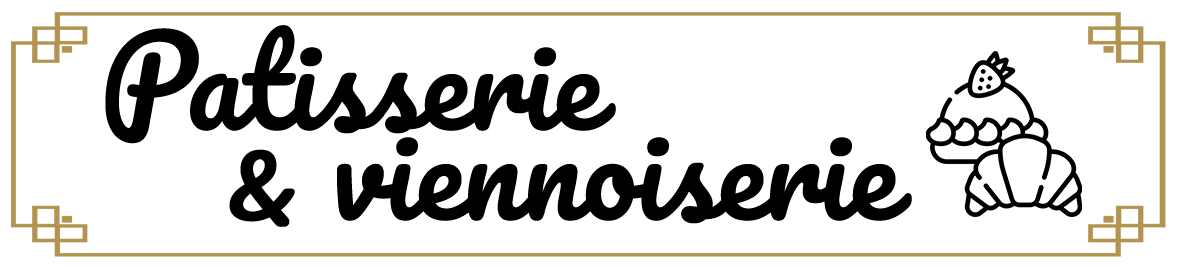
<style>
.page{position:relative;width:1178px;height:269px;background:#ffffff}
.page>*{position:absolute;margin:0}
.t1{font:120px/90px "Pacifico-Regular";color:#000000}
.t2{font:120px/19px "Pacifico-Regular";color:#000000}
.t3{font:80px/90px "Pacifico-Regular";color:#000000;font-weight:bold}
</style>
<div class="page">
<p class="t1" style="left:105px;top:25px;width:807px;height:202px"><span class="t2">Patisserie <br>      </span><span class="t3">&amp; </span>viennoiserie</p>
</div>
